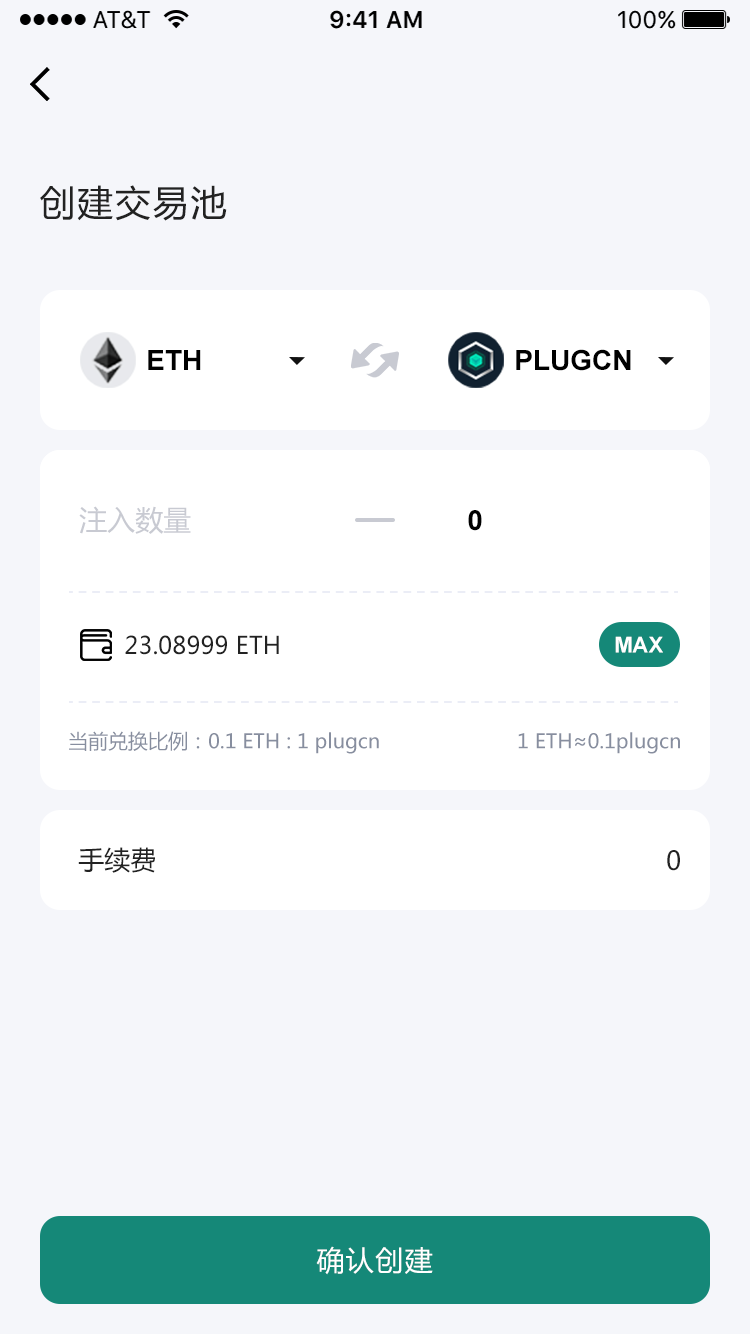
<style>
.page{position:relative;width:750px;height:1334px;background:#f5f6fa}
.page>*{position:absolute;margin:0}
.t1{font:36px "MicrosoftYaHei";letter-spacing:0.05em;color:#222222}
.t2{font:28px "Arial-BoldMT";color:#000000}
.t3{font:28px "MicrosoftYaHei";color:#c8cad2}
.t4{font:24px "MicrosoftYaHei";color:#222222}
.t5{font:22px "Arial-BoldMT";color:#ffffff}
.t6{font:20px "MicrosoftYaHei";color:#878e9f}
.t7{font:26px "MicrosoftYaHei";color:#222222}
.t8{font:28px "MicrosoftYaHei";letter-spacing:0.05em;color:#ffffff}
</style>
<div class="page">
<p class="t1" style="left:40px;top:185px;width:187px;height:36px">创建交易池</p>
<p class="t2" style="left:148px;top:350px;width:53px;height:20px">ETH</p>
<p class="t2" style="left:516px;top:349px;width:115px;height:22px">PLUGCN</p>
<p class="t3" style="left:79px;top:506px;width:112px;height:28px">注入数量</p>
<p class="t2" style="left:468px;top:510px;width:14px;height:21px">0</p>
<p class="t4" style="left:125px;top:635px;width:154px;height:20px">23.08999 ETH</p>
<p class="t5" style="left:615px;top:636px;width:48px;height:17px">MAX</p>
<p class="t6" style="left:69px;top:731px;width:310px;height:23px">当前兑换比例：0.1 ETH : 1 plugcn</p>
<p class="t6" style="left:518px;top:732px;width:162px;height:22px">1 ETH≈0.1plugcn</p>
<p class="t7" style="left:78px;top:847px;width:77px;height:26px">手续费</p>
<p class="t7" style="left:667px;top:850px;width:13px;height:21px">0</p>
<p class="t8" style="left:316px;top:1246px;width:117px;height:29px">确认创建</p>
</div>
